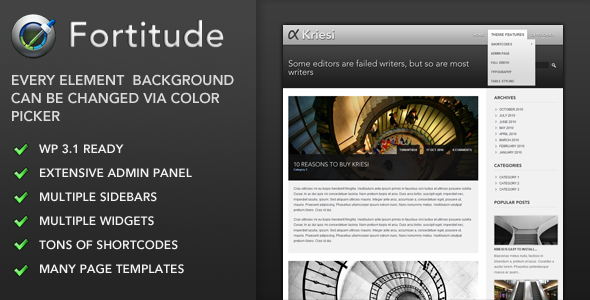
<style>
.page{position:relative;width:590px;height:300px}
.page>*{position:absolute;margin:0}
.t1{font:36px "Avenir-Heavy"}
.t2{font:14px/18px "Avenir-Heavy";color:#dadada}
.t3{font:12px/24px "Avenir-Heavy";color:#f1f1f2}
</style>
<div class="page">
<p class="t1" style="left:69px;top:19px;width:155px;height:29px">Fortitude</p>
<p class="t2" style="left:11px;top:74px;width:223px;height:48px">EVERY ELEMENT  BACKGROUND <br>CAN BE CHANGED VIA COLOR<br>PICKER</p>
<p class="t3" style="left:39px;top:144px;width:153px;height:130px">WP 3.1 READY<br>EXTENSIVE ADMIN PANEL<br>MULTIPLE SIDEBARS<br>MULTIPLE WIDGETS<br>TONS OF SHORTCODES<br>MANY PAGE TEMPLATES</p>
</div>
